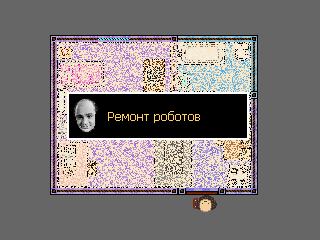
<style>
.page{position:relative;width:320px;height:240px;background:#666666}
.page>*{position:absolute;margin:0}
.t1{font:12px "Tahoma";color:#ffcd59}
</style>
<div class="page">
<p class="t1" style="left:108px;top:111px;width:92px;height:12px">Ремонт роботов</p>
</div>
